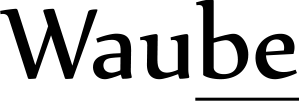
<style>
.page{position:relative;width:299px;height:101px;background:#ffffff}
.page>*{position:absolute;margin:0}
.t1{font:119.8px "Nyala-Regular";color:#000000}
.t2{font:119.8px "Nyala-Regular";color:#000000;text-decoration:underline}
</style>
<div class="page">
<p class="t1" style="left:0px;top:0px;width:299px;height:101px">Wau<span class="t2">be</span></p>
</div>
